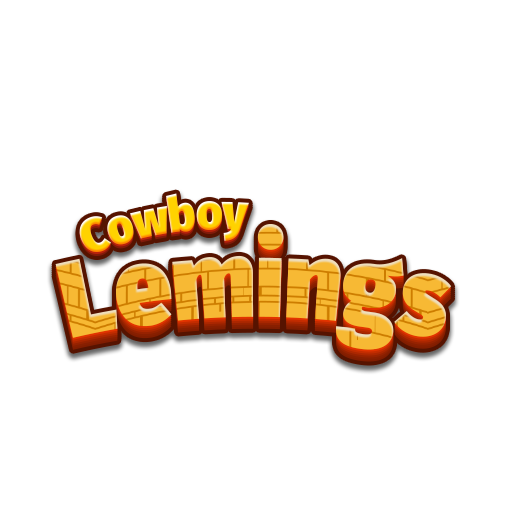
<style>
.page{position:relative;width:512px;height:512px;background:#ffffff}
.page>*{position:absolute;margin:0}
.t1{font:50px "FiraSans-Ultra";color:#ffd200;scale:0.83 1}
.t2{font:110px "FiraSans-Ultra";scale:0.83 1}
</style>
<div class="page">
<p class="t1" style="left:79px;top:193px;width:170px;height:59px;rotate:-9deg">Cowboy</p>
<p class="t2" style="left:55px;top:224px;width:397px;height:126px">Lemings</p>
</div>
